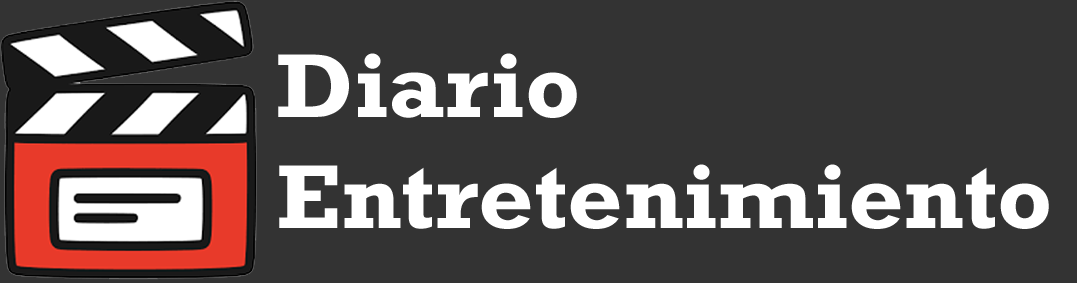
<style>
.page{position:relative;width:1077px;height:283px;background:#333333}
.page>*{position:absolute;margin:0}
.t1{font:92.1px "Rockwell-Bold";color:#ffffff;scale:1.05 1}
</style>
<div class="page">
<p class="t1" style="left:278px;top:53px;width:771px;height:176px">Diario<br>Entretenimiento</p>
</div>
